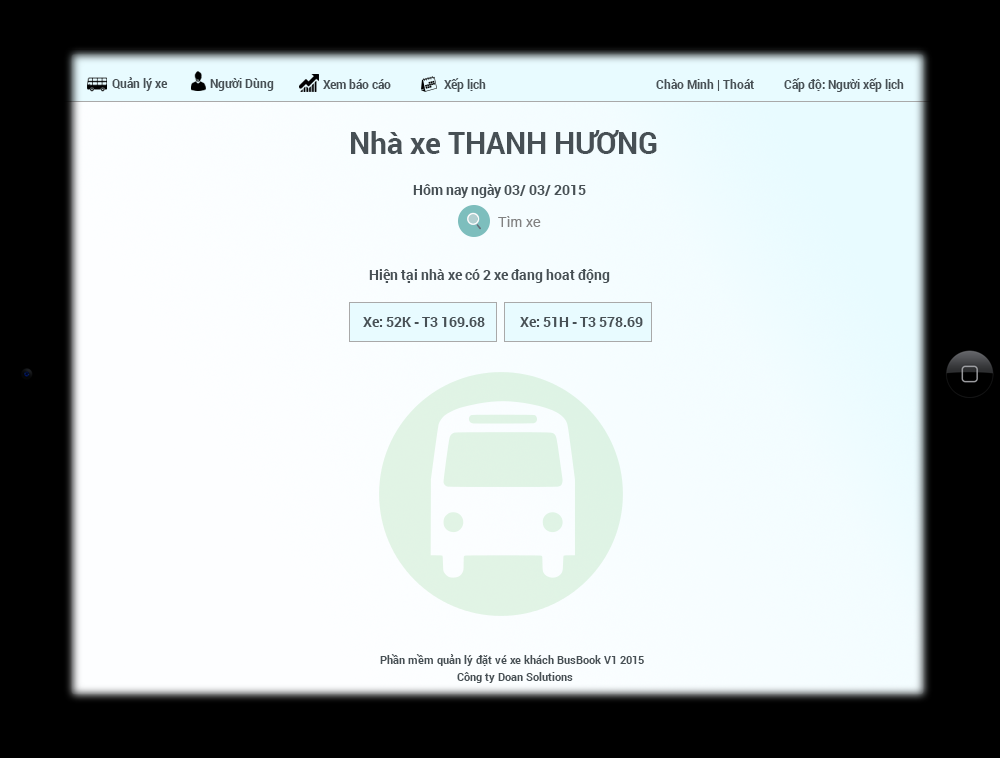
<style>
.page{position:relative;width:1000px;height:758px;background:#000000}
.page>*{position:absolute;margin:0}
.t1{font:12px "Roboto-Bold";color:#475055}
.t2{font:30px "Roboto-Bold";color:#475055}
.t3{font:14px "Roboto-Bold";color:#475055}
.t4{font:14px "ArialMT";color:#818181}
.t5{font:11px "Roboto-Bold";color:#475055}
</style>
<div class="page">
<p class="t1" style="left:112px;top:77px;width:56px;height:14px">Quản lý xe</p>
<p class="t1" style="left:210px;top:78px;width:64px;height:13px">Người Dùng</p>
<p class="t1" style="left:444px;top:78px;width:42px;height:14px">Xếp lịch</p>
<p class="t1" style="left:784px;top:78px;width:120px;height:14px">Cấp độ: Người xếp lịch</p>
<p class="t1" style="left:323px;top:79px;width:68px;height:10px">Xem báo cáo</p>
<p class="t1" style="left:656px;top:79px;width:98px;height:12px">Chào Minh | Thoát</p>
<p class="t2" style="left:351px;top:130px;width:306px;height:24px">Nhà xe THANH HƯƠNG</p>
<p class="t3" style="left:413px;top:184px;width:173px;height:14px">Hôm nay ngày 03/ 03/ 2015</p>
<p class="t4" style="left:498px;top:216px;width:43px;height:11px">Tìm xe</p>
<p class="t3" style="left:369px;top:269px;width:241px;height:14px">Hiện tại nhà xe có 2 xe đang hoat động</p>
<p class="t3" style="left:363px;top:317px;width:122px;height:10px">Xe: 52K - T3 169.68</p>
<p class="t3" style="left:520px;top:317px;width:123px;height:10px">Xe: 51H - T3 578.69</p>
<p class="t5" style="left:380px;top:654px;width:264px;height:12px">Phần mềm quản lý đặt vé xe khách BusBook V1 2015</p>
<p class="t5" style="left:457px;top:672px;width:116px;height:11px">Công ty Doan Solutions</p>
</div>
